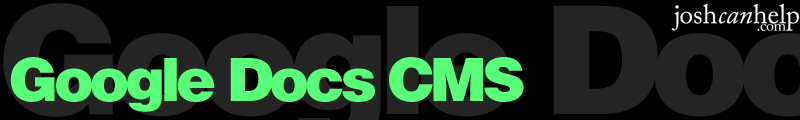
<style>
.page{position:relative;width:800px;height:120px;background:#000000}
.page>*{position:absolute;margin:0}
.t1{font:60px "HelveticaLTStd-Blk";letter-spacing:-0.075em;color:#59fe78}
</style>
<div class="page">
<p class="t1" style="left:10px;top:57px;width:514px;height:55px">Google Docs CMS</p>
</div>
